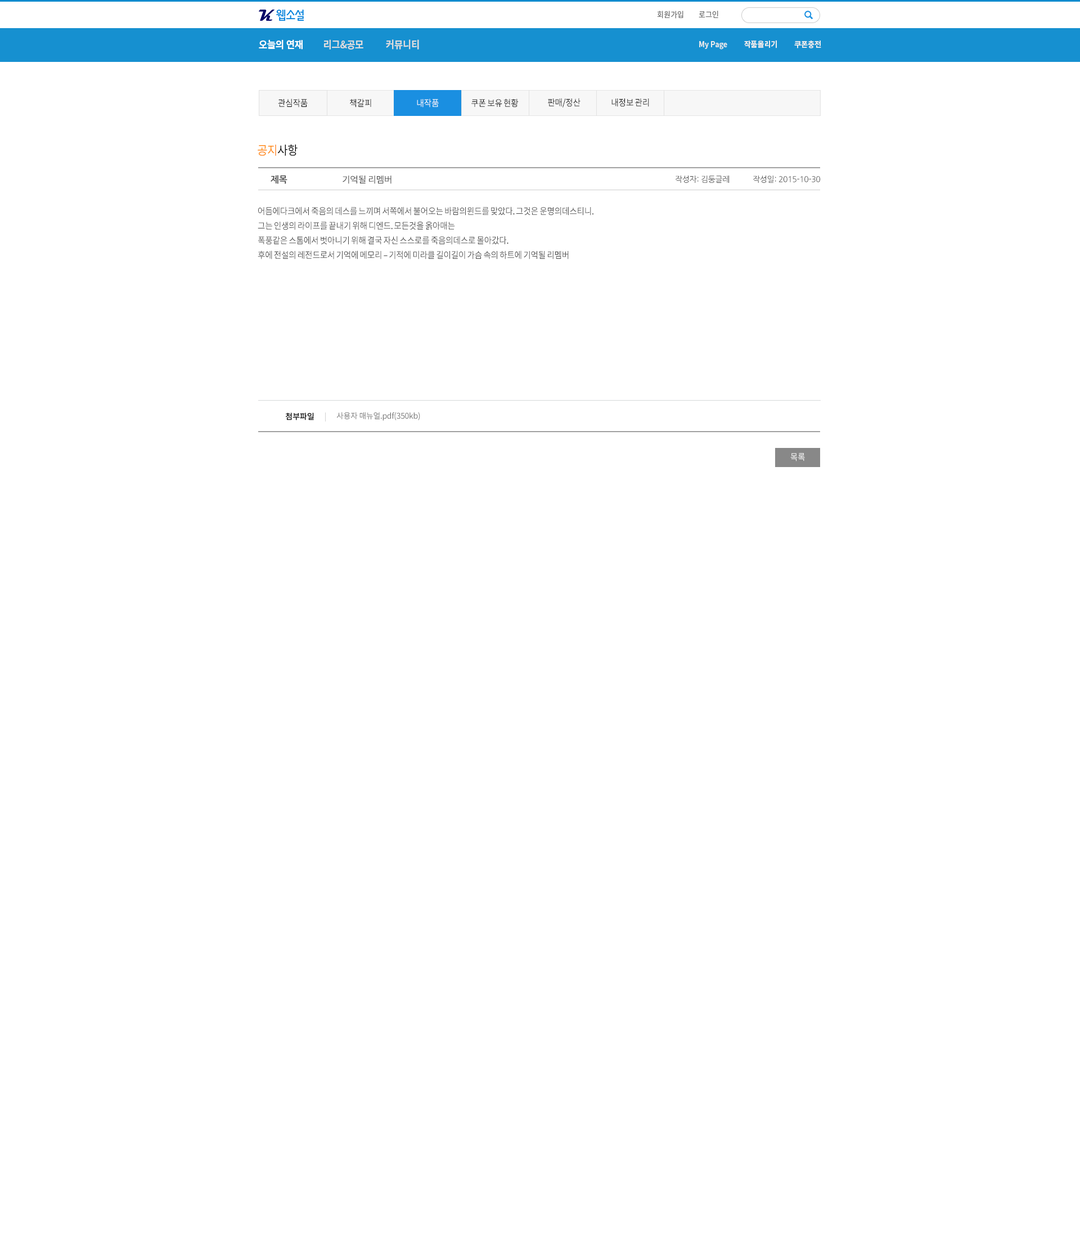
<style>
.page{position:relative;width:1080px;height:1238px;background:#ffffff}
.page>*{position:absolute;margin:0}
.t1{font:7.9px "NotoSansCJKkr-Regular";letter-spacing:-0.002em;color:#727272;scale:0.92 1}
.t2{font:10.1px "NotoSansCJKkr-Bold";letter-spacing:-0.002em;color:#dddddd;scale:0.92 1}
.t3{font:10.1px "NotoSansCJKkr-Bold";letter-spacing:-0.002em;color:#ffffff;scale:0.92 1}
.t4{font:7.9px "NotoSansCJKkr-Bold";letter-spacing:-0.002em;color:#ececec;scale:0.92 1}
.t5{font:9px "NotoSansCJKkr-Regular";letter-spacing:-0.05em;color:#000000;scale:0.92 1}
.t6{font:9px "NotoSansCJKkr-Regular";letter-spacing:-0.05em;color:#ffffff;scale:0.92 1}
.t7{font:12.4px "NotoSansCJKkr-Regular";letter-spacing:-0.05em;color:#ff8400;scale:0.92 1}
.t8{font:12.4px "NotoSansCJKkr-Regular";letter-spacing:-0.05em;color:#000000;scale:0.92 1}
.t9{font:9px "NanumGothicOTFBold";letter-spacing:-0.025em;color:#474747}
.t10{font:9px "NotoSansCJKkr-Regular";letter-spacing:-0.025em;color:#474747}
.t11{font:7.9px "NanumGothicOTF";letter-spacing:-0.025em;color:#474747}
.t12{font:9px/14.6px "NotoSansCJKkr-Regular";letter-spacing:-0.05em;color:#474747;scale:0.92 1}
.t13{font:9px/10.1px "NotoSansCJKkr-Regular";letter-spacing:-0.05em;color:#474747;scale:0.92 1}
.t14{font:7.9px "NotoSansCJKkr-Regular";letter-spacing:-0.025em;color:#000000;font-weight:bold}
.t15{font:7.9px "NotoSansCJKkr-Regular";letter-spacing:-0.025em;color:#747474}
</style>
<div class="page">
<p class="t1" style="left:657px;top:11px;width:26px;height:8px">회원가입</p>
<p class="t1" style="left:699px;top:11px;width:19px;height:7px">로그인</p>
<p class="t2" style="left:259px;top:39px;width:160px;height:11px"><span class="t3">오늘의 연재         </span>리그&amp;공모          커뮤니티</p>
<p class="t4" style="left:699px;top:40px;width:122px;height:10px">My Page          작품올리기          쿠폰충전</p>
<p class="t5" style="left:278px;top:98px;width:30px;height:9px">관심작품</p>
<p class="t5" style="left:350px;top:98px;width:21px;height:9px">책갈피</p>
<p class="t6" style="left:417px;top:98px;width:22px;height:9px">내작품</p>
<p class="t5" style="left:471px;top:98px;width:48px;height:9px">쿠폰 보유 현황</p>
<p class="t5" style="left:548px;top:98px;width:32px;height:9px">판매/정산</p>
<p class="t5" style="left:611px;top:98px;width:38px;height:9px">내정보 관리</p>
<p class="t7" style="left:258px;top:144px;width:40px;height:12px">공지<span class="t8">사항</span></p>
<p class="t9" style="left:271px;top:175px;width:16px;height:9px">제목</p>
<p class="t10" style="left:343px;top:176px;width:49px;height:8px">기억될 리멤버</p>
<p class="t11" style="left:676px;top:176px;width:53px;height:7px">작성자: 김둥글레</p>
<p class="t11" style="left:753px;top:176px;width:67px;height:7px">작성일: 2015-10-30</p>
<p class="t12" style="left:258px;top:206px;width:335px;height:53px"><span class="t13"><br></span>어듬에다크에서 죽음의 데스를 느끼며 서쪽에서 불어오는 바람의윈드를 맞았다. 그것은 운명의데스티니. <br>그는 인생의 라이프를 끝내기 위해 디엔드. 모든것을 옭아매는 <br>폭풍같은 스톰에서 벗아니기 위해 결국 자신 스스로를 죽음의데스로 몰아갔다. <br>후에 전설의 레전드로서 기억에 메모리 – 기적에 미라클 길이길이 가슴 속의 하트에 기억될 리멤버</p>
<p class="t14" style="left:285px;top:412px;width:29px;height:8px">첨부파일</p>
<p class="t15" style="left:336px;top:412px;width:84px;height:9px">사용자 매뉴얼.pdf(350kb)</p>
<p class="t6" style="left:790px;top:453px;width:15px;height:8px">목록</p>
</div>
